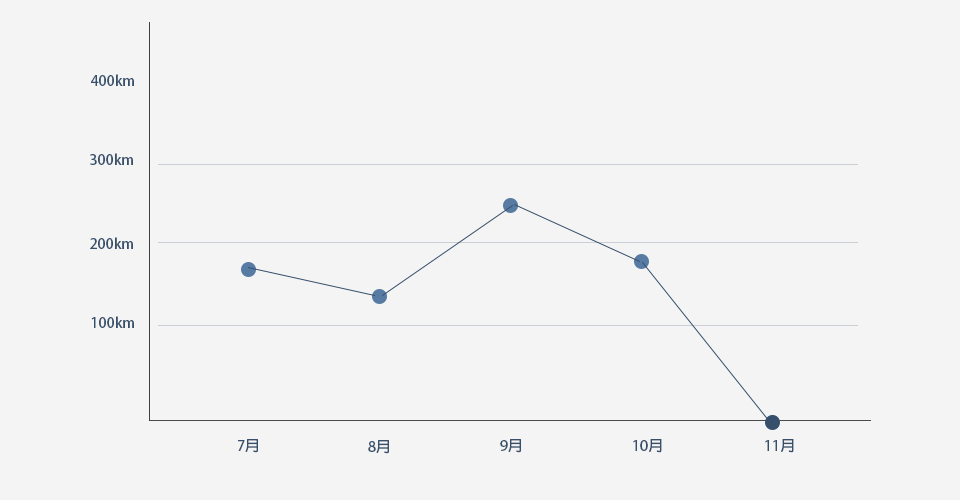
<style>
.page{position:relative;width:960px;height:500px;background:#f4f4f4}
.page>*{position:absolute;margin:0}
.t1{font:14.4px "AdobeFanHeitiStd-Bold";color:#364f6b}
</style>
<div class="page">
<p class="t1" style="left:91px;top:74px;width:43px;height:12px">400km</p>
<p class="t1" style="left:90px;top:153px;width:43px;height:12px">300km</p>
<p class="t1" style="left:90px;top:237px;width:43px;height:12px">200km</p>
<p class="t1" style="left:91px;top:316px;width:43px;height:12px">100km</p>
<p class="t1" style="left:238px;top:439px;width:20px;height:14px">7月</p>
<p class="t1" style="left:368px;top:440px;width:21px;height:14px">8月</p>
<p class="t1" style="left:500px;top:439px;width:21px;height:14px">9月</p>
<p class="t1" style="left:633px;top:439px;width:29px;height:14px">10月</p>
<p class="t1" style="left:765px;top:439px;width:29px;height:14px">11月</p>
</div>
